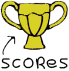
<style>
.page{position:relative;width:69px;height:71px;background:#ffffff}
.page>*{position:absolute;margin:0}
.t1{font:28.3px "DoodleJump";color:#000000}
</style>
<div class="page">
<p class="t1" style="left:1px;top:56px;width:67px;height:13px">scores</p>
</div>
